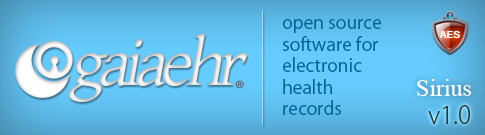
<style>
.page{position:relative;width:485px;height:135px}
.page>*{position:absolute;margin:0}
.t1{font:18px "KozGoPro-Regular";color:#006699}
.t2{font:69.2px "GentiumBasic";letter-spacing:-0.1em;color:#e0e0e0;font-style:italic}
.t3{font:69.2px "GentiumBasic";letter-spacing:-0.1em;color:#e2e2e2;font-style:italic}
.t4{font:13px "Tunga-Bold";color:#ffffff}
.t5{font:69.2px "GentiumBasic";letter-spacing:-0.1em;color:#dfdfdf;font-style:italic}
.t6{font:24px "TimesNewRomanPSMT";color:#ffffff}
.t7{font:24px "KozGoPro-Light";color:#333333}
</style>
<div class="page">
<p class="t1" style="left:282px;top:19px;width:99px;height:96px">open source<br>software for<br>electronic<br>health<br>records</p>
<p class="t2" style="left:99px;top:39px;width:67px;height:47px">aia</p>
<p class="t3" style="left:163px;top:33px;width:84px;height:53px">ehr</p>
<p class="t4" style="left:439px;top:31px;width:21px;height:7px">AES</p>
<p class="t5" style="left:68px;top:53px;width:41px;height:49px">g</p>
<p class="t6" style="left:417px;top:79px;width:54px;height:17px">Sirius</p>
<p class="t7" style="left:428px;top:105px;width:42px;height:19px">v1.0</p>
</div>
